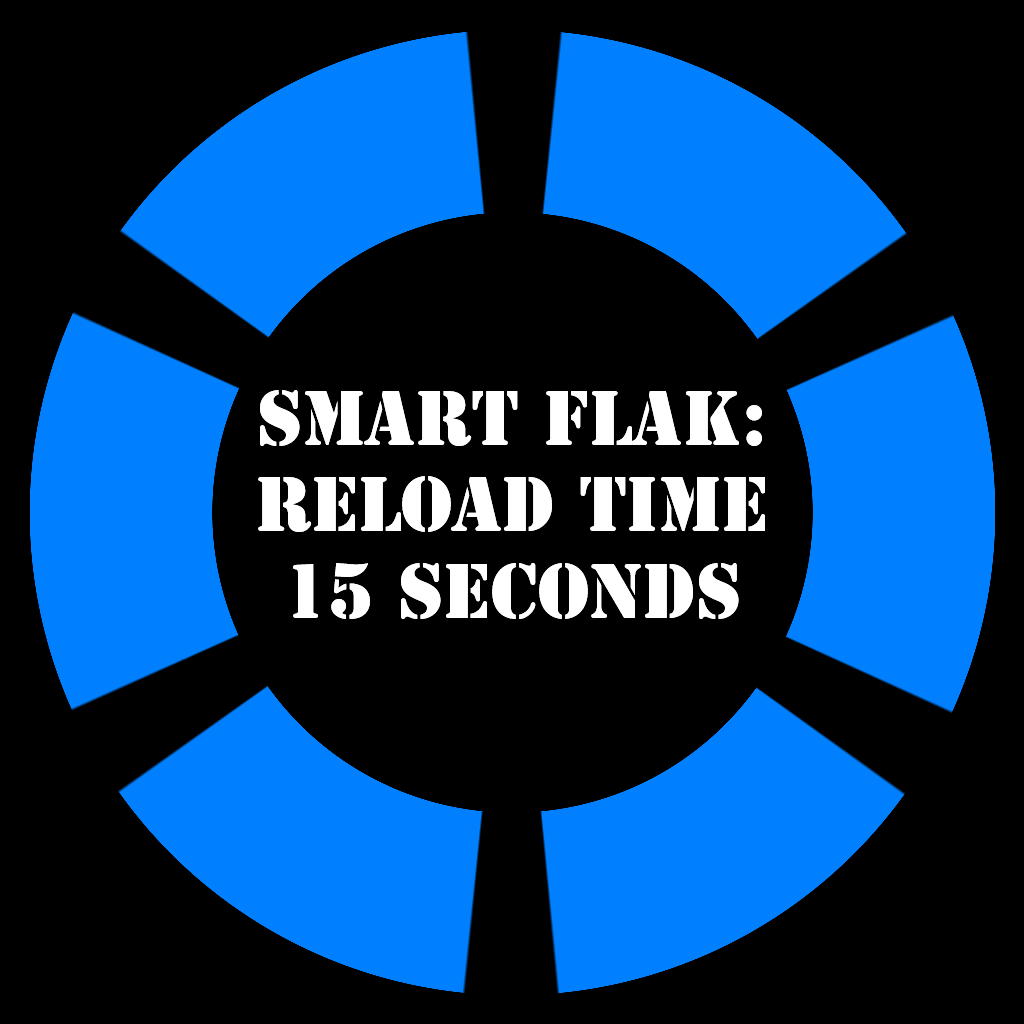
<style>
.page{position:relative;width:1024px;height:1024px;background:#000000}
.page>*{position:absolute;margin:0}
.t1{font:72px "StencilStd";color:#ffffff}
</style>
<div class="page">
<p class="t1" style="left:258px;top:390px;width:507px;height:229px;text-align:center">Smart Flak:<br>Reload time<br>15 Seconds</p>
</div>
